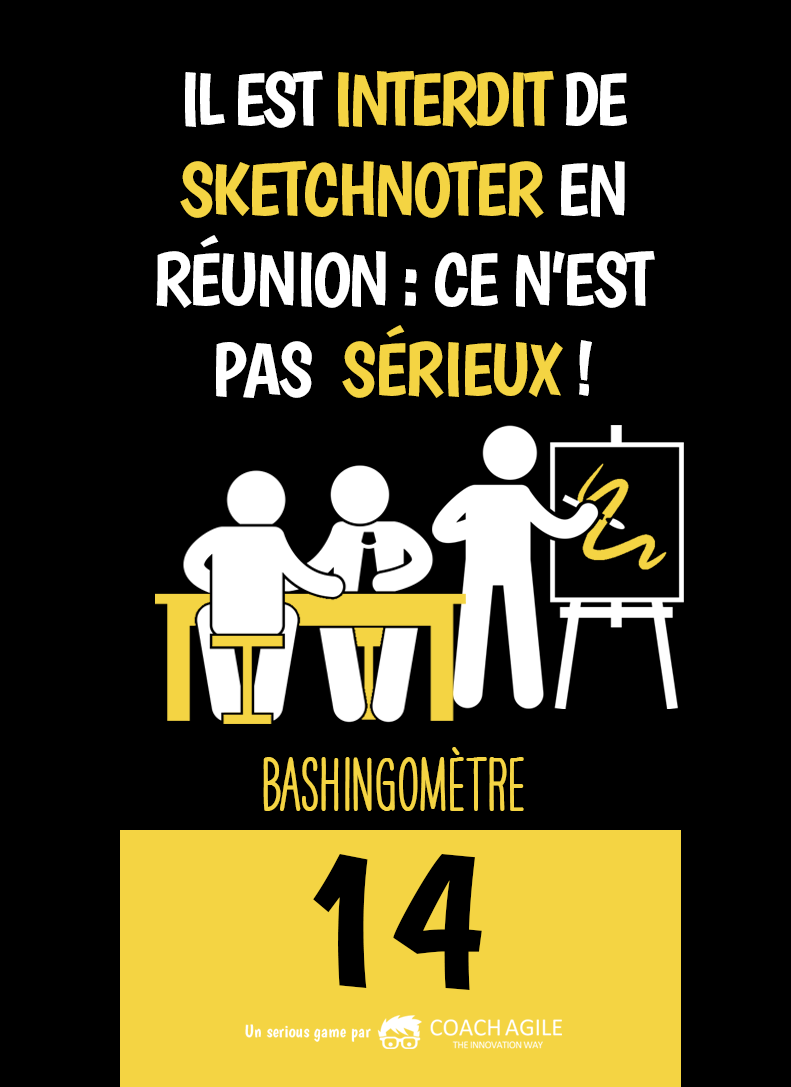
<style>
.page{position:relative;width:791px;height:1087px;background:#000000}
.page>*{position:absolute;margin:0}
.t1{font:75px "Boogaloo-Regular";letter-spacing:-0.04em;color:#ffffff}
.t2{font:75px "Boogaloo-Regular";letter-spacing:-0.06em;color:#ffffff}
.t3{font:75px "Boogaloo-Regular";letter-spacing:-0.06em;color:#f4d443}
.t4{font:75px "Boogaloo-Regular";letter-spacing:-0.04em;color:#f4d443}
.t5{font:66.7px "HAVEANICEDAYTallW04-Bold";color:#f4d443}
.t6{font:200px "Boogaloo-Regular";color:#000000}
</style>
<div class="page">
<p class="t1" style="left:156px;top:71px;width:499px;height:327px;text-align:center"><span class="t2">IL EST </span><span class="t3">INTERDIT </span><span class="t2">DE </span><span class="t4">SKETCHNOTER </span>EN <br>RÉUNION : CE N’EST PAS  <span class="t4">SÉRIEUX </span>!</p>
<p class="t5" style="left:263px;top:747px;width:261px;height:64px">BASHINgomètre</p>
<p class="t6" style="left:313px;top:854px;width:169px;height:136px">14</p>
</div>
